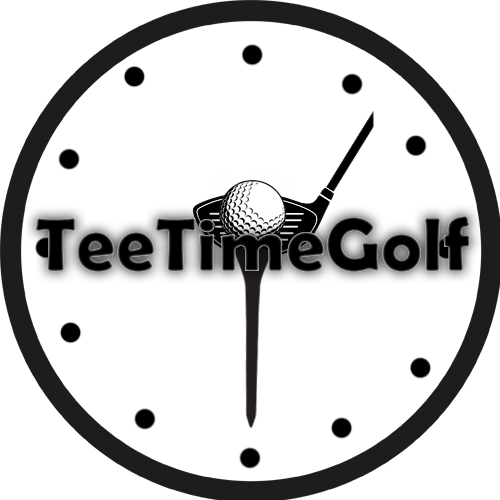
<style>
.page{position:relative;width:500px;height:500px;background:#ffffff}
.page>*{position:absolute;margin:0}
.t1{font:78.3px "BerlinSansFBDemi-Bold";color:#000000}
</style>
<div class="page">
<p class="t1" style="left:35px;top:216px;width:435px;height:56px">TeeTimeGolf</p>
</div>
